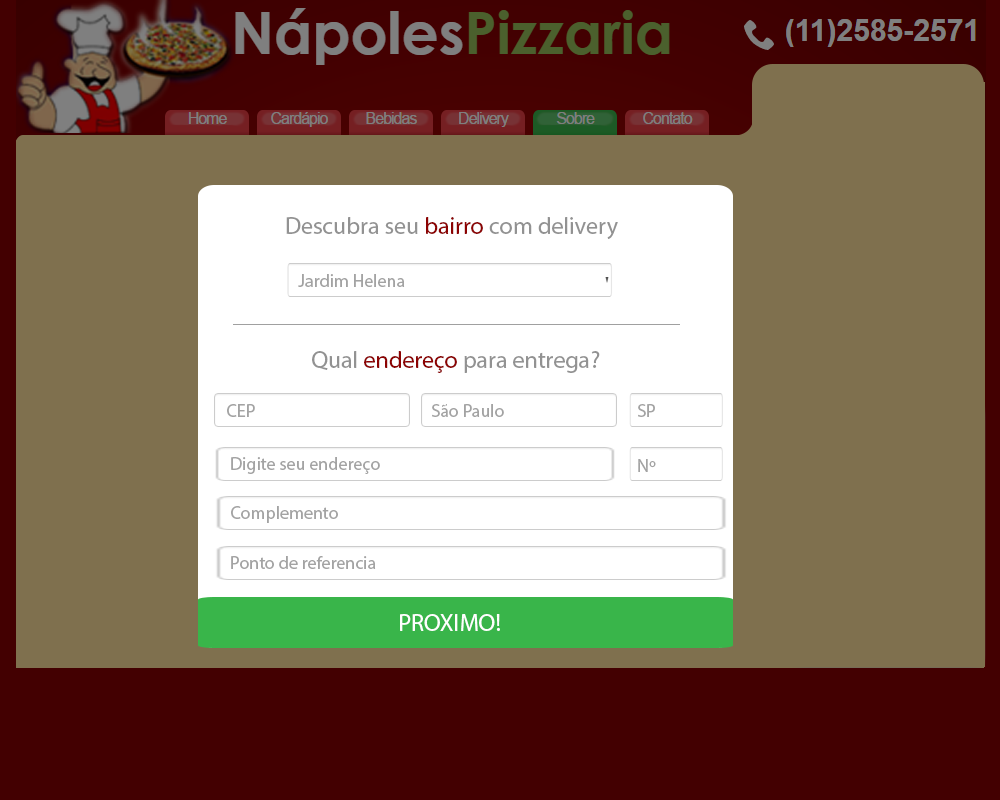
<style>
.page{position:relative;width:1000px;height:800px;background:#7f704e}
.page>*{position:absolute;margin:0}
.t1{font:24px "MyriadPro-Regular";color:#929292}
.t2{font:24px "MyriadPro-Regular";color:#8c0202}
.t3{font:18px "MyriadPro-Regular";color:#a3a3a3}
.t4{font:24px "MyriadPro-Regular";color:#ffffff}
</style>
<div class="page">
<p class="t1" style="left:286px;top:217px;width:332px;height:22px">Descubra seu <span class="t2">bairro </span>com delivery</p>
<p class="t3" style="left:298px;top:274px;width:107px;height:13px">Jardim Helena</p>
<p class="t1" style="left:312px;top:351px;width:288px;height:22px">Qual<span class="t2"> endereço </span>para entrega?</p>
<p class="t3" style="left:227px;top:404px;width:28px;height:13px">CEP</p>
<p class="t3" style="left:432px;top:404px;width:72px;height:13px">São Paulo</p>
<p class="t3" style="left:638px;top:404px;width:17px;height:13px">SP</p>
<p class="t3" style="left:231px;top:457px;width:149px;height:17px">Digite seu endereço</p>
<p class="t3" style="left:638px;top:459px;width:18px;height:13px">Nº</p>
<p class="t3" style="left:231px;top:506px;width:107px;height:17px">Complemento</p>
<p class="t3" style="left:231px;top:556px;width:145px;height:13px">Ponto de referencia</p>
<p class="t4" style="left:400px;top:614px;width:100px;height:17px">PROXIMO!</p>
</div>
